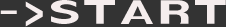
<style>
.page{position:relative;width:226px;height:27px;background:#333333}
.page>*{position:absolute;margin:0}
.t1{font:32.7px "BMHANNA11yrsoldOTF";letter-spacing:0.08em;color:#f5eded;scale:1.5 1}
</style>
<div class="page">
<p class="t1" style="left:0px;top:0px;width:226px;height:27px">-&gt;START</p>
</div>
